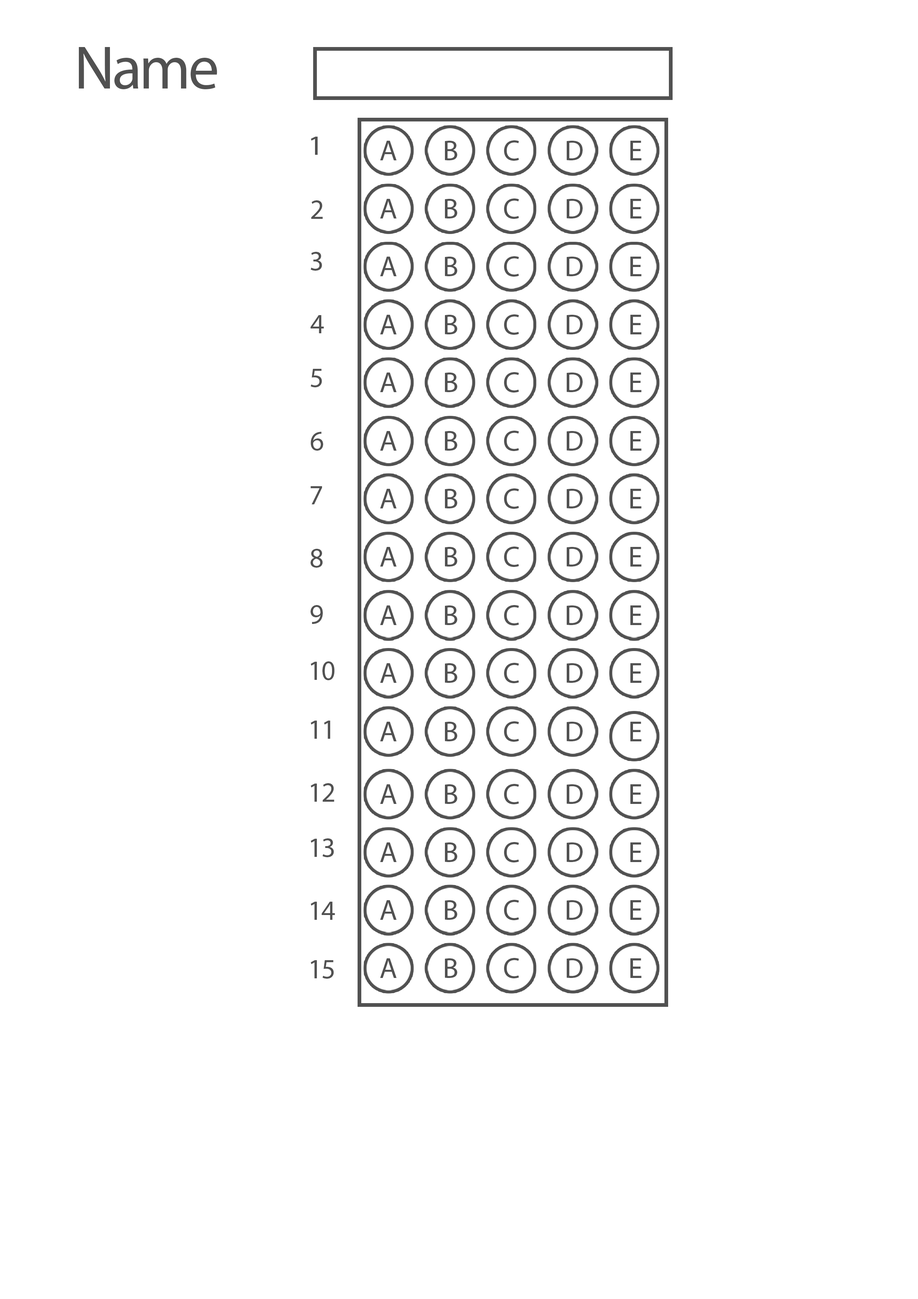
<style>
.page{position:relative;width:918px;height:1299px;background:#ffffff}
.page>*{position:absolute;margin:0}
.t1{font:61.7px "MyriadPro-Regular";letter-spacing:-0.04em;color:#515151}
.t2{font:27.8px "MyriadPro-Regular";letter-spacing:-0.04em;color:#515151;scale:1.12 1}
.t3{font:29px "MyriadPro-Regular";letter-spacing:-0.04em;color:#515151}
.t4{font:27.8px "MyriadPro-Regular";letter-spacing:-0.04em;color:#515151}
</style>
<div class="page">
<p class="t1" style="left:79px;top:47px;width:138px;height:43px">Name</p>
<p class="t2" style="left:311px;top:137px;width:7px;height:18px">1</p>
<p class="t3" style="left:380px;top:141px;width:17px;height:19px">A</p>
<p class="t3" style="left:445px;top:141px;width:13px;height:19px">B</p>
<p class="t3" style="left:504px;top:140px;width:15px;height:21px">C</p>
<p class="t3" style="left:567px;top:141px;width:16px;height:19px">D</p>
<p class="t3" style="left:630px;top:141px;width:12px;height:19px">E</p>
<p class="t4" style="left:311px;top:200px;width:12px;height:19px">2</p>
<p class="t3" style="left:380px;top:199px;width:17px;height:19px">A</p>
<p class="t3" style="left:445px;top:199px;width:13px;height:19px">B</p>
<p class="t3" style="left:504px;top:198px;width:15px;height:21px">C</p>
<p class="t3" style="left:567px;top:199px;width:16px;height:19px">D</p>
<p class="t3" style="left:630px;top:199px;width:12px;height:19px">E</p>
<p class="t4" style="left:311px;top:252px;width:11px;height:19px">3</p>
<p class="t3" style="left:380px;top:257px;width:17px;height:19px">A</p>
<p class="t3" style="left:445px;top:257px;width:13px;height:19px">B</p>
<p class="t3" style="left:504px;top:256px;width:15px;height:21px">C</p>
<p class="t3" style="left:567px;top:257px;width:16px;height:19px">D</p>
<p class="t3" style="left:630px;top:257px;width:12px;height:19px">E</p>
<p class="t4" style="left:311px;top:315px;width:13px;height:18px">4</p>
<p class="t3" style="left:380px;top:315px;width:17px;height:19px">A</p>
<p class="t3" style="left:445px;top:315px;width:13px;height:19px">B</p>
<p class="t3" style="left:504px;top:314px;width:15px;height:21px">C</p>
<p class="t3" style="left:567px;top:315px;width:16px;height:19px">D</p>
<p class="t3" style="left:630px;top:315px;width:12px;height:19px">E</p>
<p class="t4" style="left:311px;top:369px;width:11px;height:18px">5</p>
<p class="t3" style="left:380px;top:372px;width:17px;height:20px">A</p>
<p class="t3" style="left:445px;top:372px;width:13px;height:20px">B</p>
<p class="t3" style="left:504px;top:372px;width:15px;height:20px">C</p>
<p class="t3" style="left:567px;top:372px;width:16px;height:20px">D</p>
<p class="t3" style="left:630px;top:372px;width:12px;height:20px">E</p>
<p class="t4" style="left:311px;top:432px;width:12px;height:19px">6</p>
<p class="t3" style="left:380px;top:431px;width:17px;height:20px">A</p>
<p class="t3" style="left:445px;top:431px;width:13px;height:20px">B</p>
<p class="t3" style="left:504px;top:431px;width:15px;height:20px">C</p>
<p class="t3" style="left:567px;top:431px;width:16px;height:20px">D</p>
<p class="t3" style="left:630px;top:431px;width:12px;height:20px">E</p>
<p class="t4" style="left:311px;top:486px;width:11px;height:18px">7</p>
<p class="t3" style="left:380px;top:489px;width:17px;height:19px">A</p>
<p class="t3" style="left:445px;top:489px;width:13px;height:19px">B</p>
<p class="t3" style="left:504px;top:488px;width:15px;height:21px">C</p>
<p class="t3" style="left:567px;top:489px;width:16px;height:19px">D</p>
<p class="t3" style="left:630px;top:489px;width:12px;height:19px">E</p>
<p class="t4" style="left:311px;top:549px;width:12px;height:19px">8</p>
<p class="t3" style="left:380px;top:547px;width:17px;height:19px">A</p>
<p class="t3" style="left:445px;top:547px;width:13px;height:19px">B</p>
<p class="t3" style="left:504px;top:546px;width:15px;height:21px">C</p>
<p class="t3" style="left:567px;top:547px;width:16px;height:19px">D</p>
<p class="t3" style="left:630px;top:547px;width:12px;height:19px">E</p>
<p class="t4" style="left:311px;top:605px;width:12px;height:19px">9</p>
<p class="t3" style="left:380px;top:605px;width:17px;height:20px">A</p>
<p class="t3" style="left:445px;top:605px;width:13px;height:20px">B</p>
<p class="t3" style="left:504px;top:605px;width:15px;height:20px">C</p>
<p class="t3" style="left:567px;top:605px;width:16px;height:20px">D</p>
<p class="t3" style="left:630px;top:605px;width:12px;height:20px">E</p>
<p class="t4" style="left:311px;top:661px;width:24px;height:19px">10</p>
<p class="t3" style="left:380px;top:663px;width:17px;height:20px">A</p>
<p class="t3" style="left:445px;top:663px;width:13px;height:20px">B</p>
<p class="t3" style="left:504px;top:663px;width:15px;height:20px">C</p>
<p class="t3" style="left:567px;top:663px;width:16px;height:20px">D</p>
<p class="t3" style="left:630px;top:663px;width:12px;height:20px">E</p>
<p class="t4" style="left:311px;top:720px;width:19px;height:19px">11</p>
<p class="t3" style="left:380px;top:722px;width:17px;height:19px">A</p>
<p class="t3" style="left:445px;top:722px;width:13px;height:19px">B</p>
<p class="t3" style="left:504px;top:721px;width:15px;height:21px">C</p>
<p class="t3" style="left:567px;top:722px;width:16px;height:19px">D</p>
<p class="t3" style="left:630px;top:722px;width:12px;height:19px">E</p>
<p class="t4" style="left:311px;top:783px;width:23px;height:19px">12</p>
<p class="t3" style="left:380px;top:784px;width:17px;height:20px">A</p>
<p class="t3" style="left:445px;top:784px;width:13px;height:20px">B</p>
<p class="t3" style="left:504px;top:784px;width:15px;height:20px">C</p>
<p class="t3" style="left:567px;top:784px;width:16px;height:20px">D</p>
<p class="t3" style="left:630px;top:784px;width:12px;height:20px">E</p>
<p class="t4" style="left:311px;top:838px;width:23px;height:19px">13</p>
<p class="t3" style="left:380px;top:842px;width:17px;height:20px">A</p>
<p class="t3" style="left:445px;top:842px;width:13px;height:20px">B</p>
<p class="t3" style="left:504px;top:842px;width:15px;height:20px">C</p>
<p class="t3" style="left:567px;top:842px;width:16px;height:20px">D</p>
<p class="t3" style="left:630px;top:842px;width:12px;height:20px">E</p>
<p class="t4" style="left:311px;top:901px;width:24px;height:19px">14</p>
<p class="t3" style="left:380px;top:900px;width:17px;height:20px">A</p>
<p class="t3" style="left:445px;top:900px;width:13px;height:20px">B</p>
<p class="t3" style="left:504px;top:900px;width:15px;height:20px">C</p>
<p class="t3" style="left:567px;top:900px;width:16px;height:20px">D</p>
<p class="t3" style="left:630px;top:900px;width:12px;height:20px">E</p>
<p class="t4" style="left:311px;top:960px;width:23px;height:18px">15</p>
<p class="t3" style="left:380px;top:958px;width:17px;height:20px">A</p>
<p class="t3" style="left:445px;top:958px;width:13px;height:20px">B</p>
<p class="t3" style="left:504px;top:958px;width:15px;height:20px">C</p>
<p class="t3" style="left:567px;top:958px;width:16px;height:20px">D</p>
<p class="t3" style="left:630px;top:958px;width:12px;height:20px">E</p>
</div>
